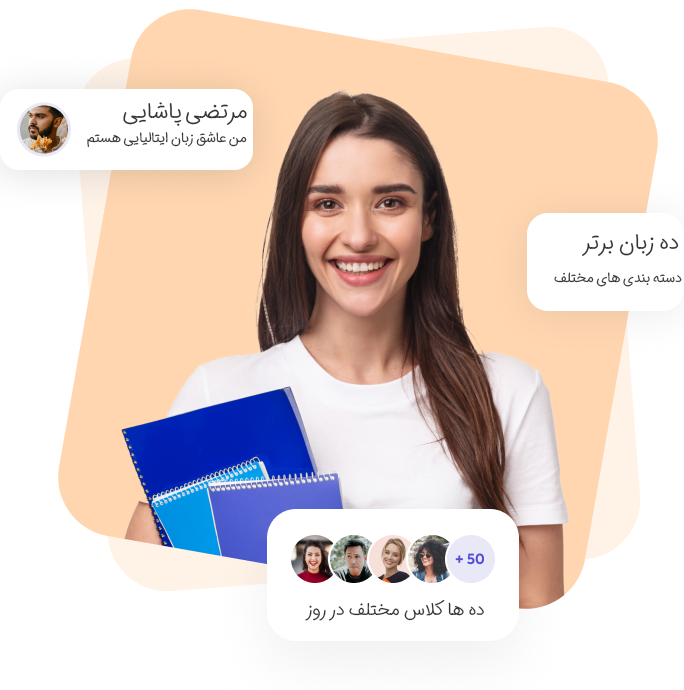
<style>
.page{position:relative;width:684px;height:690px;background:#ffffff}
.page>*{position:absolute;margin:0}
.t1{font:22px "IRANSansDN-Light";letter-spacing:-0.02em;color:#333333}
.t2{font:14px "IRANSansDN-Light";letter-spacing:-0.02em;color:#333333}
.t3{font:18px "IRANSansDN-Light";letter-spacing:-0.02em;color:#333333}
</style>
<div class="page">
<p class="t1" style="left:123px;top:102px;width:124px;height:24px">مرتضی پاشایی</p>
<p class="t2" style="left:87px;top:132px;width:160px;height:16px">من عاشق زبان ایتالیایی هستم</p>
<p class="t1" style="left:582px;top:234px;width:97px;height:22px">ده زبان برتر</p>
<p class="t2" style="left:554px;top:272px;width:128px;height:15px">دسته بندی های مختلف</p>
<p class="t3" style="left:305px;top:599px;width:179px;height:22px">ده ها کلاس مختلف در روز</p>
</div>
